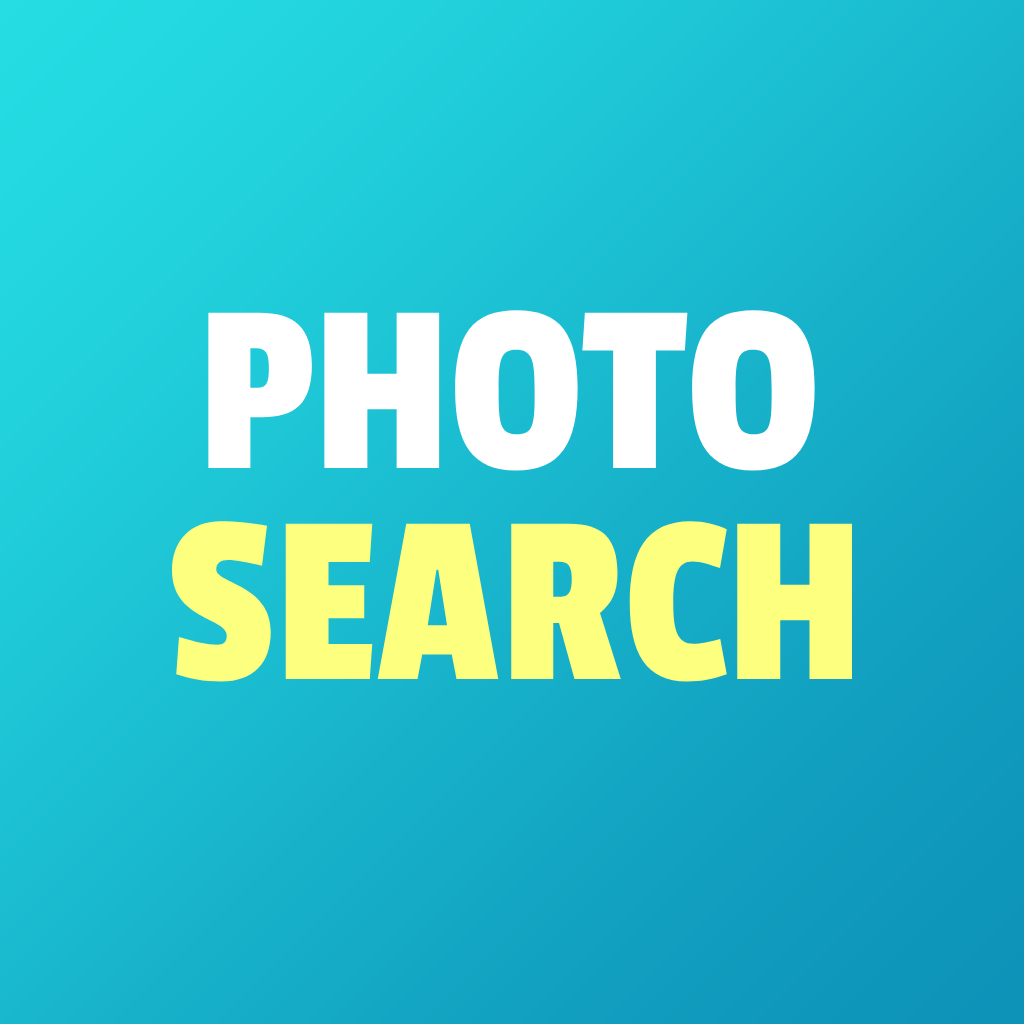
<style>
.page{position:relative;width:1024px;height:1024px}
.page>*{position:absolute;margin:0}
.t1{font:250px "PassionOne-Regular";color:#ffffff}
.t2{font:250px "PassionOne-Regular";color:#fdff7e}
</style>
<div class="page">
<p class="t1" style="left:208px;top:310px;width:607px;height:161px">PHOTO</p>
<p class="t2" style="left:172px;top:521px;width:680px;height:161px">SEARCH</p>
</div>
